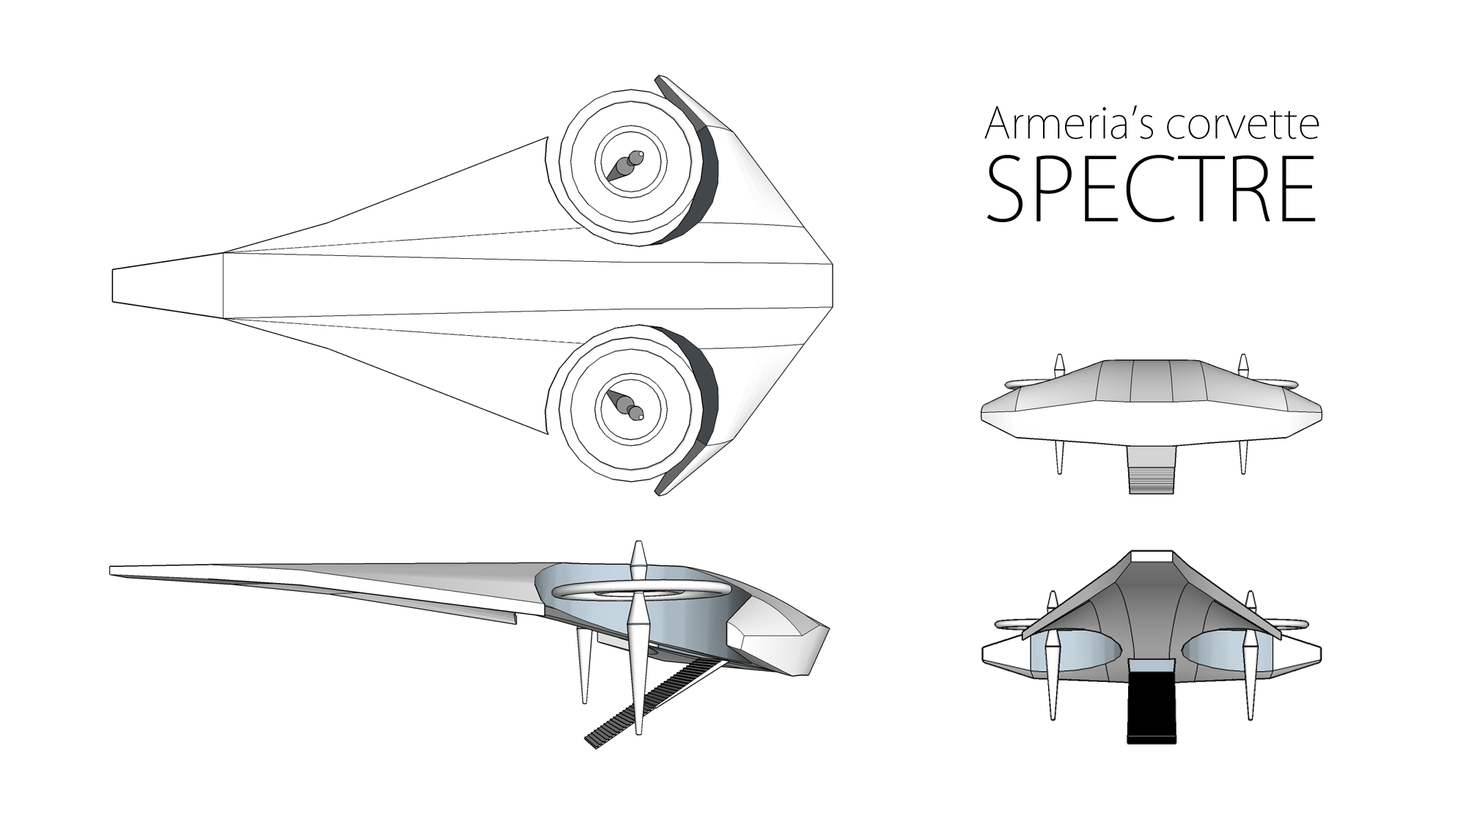
<style>
.page{position:relative;width:1466px;height:814px;background:#ffffff}
.page>*{position:absolute;margin:0}
.t1{font:42.8px "KozGoPr6N-ExtraLight";color:#000000}
.t2{font:85.5px/82.5px "KozGoPr6N-ExtraLight";color:#000000;font-weight:bold}
</style>
<div class="page">
<p class="t1" style="left:984px;top:105px;width:335px;height:117px;text-align:center">Armeria’s corvette<br><span class="t2">SPECTRE</span></p>
</div>
